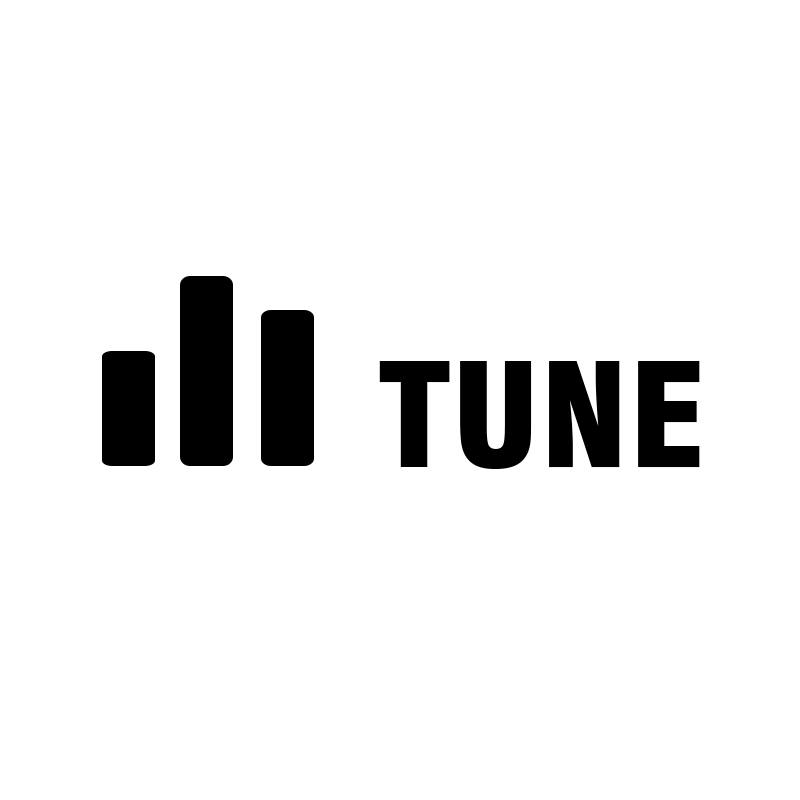
<style>
.page{position:relative;width:800px;height:800px;background:#ffffff}
.page>*{position:absolute;margin:0}
.t1{font:140.3px "Swiss721BT-BlackCondensed";color:#000000;scale:1.07 1}
</style>
<div class="page">
<p class="t1" style="left:379px;top:361px;width:321px;height:108px">TUNE</p>
</div>
